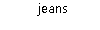
<style>
.page{position:relative;width:100px;height:30px;background:#ffffff}
.page>*{position:absolute;margin:0}
.t1{font:13.3px "Ebrima";color:#000000}
.t2{font:13.3px "Ebrima";color:#ffffff}
</style>
<div class="page">
<p class="t1" style="left:37px;top:3px;width:30px;height:13px"><span class="t2">   </span>  jeans</p>
</div>
